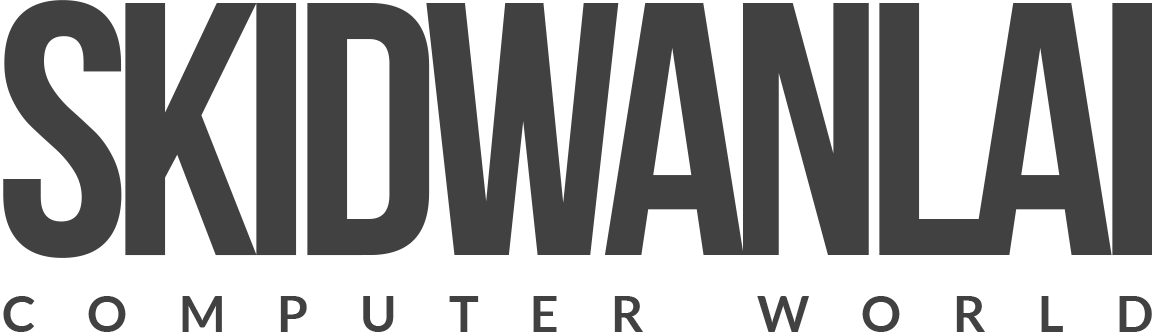
<style>
.page{position:relative;width:1155px;height:335px;background:#ffffff}
.page>*{position:absolute;margin:0}
.t1{font:360px "BebasNeueBold";letter-spacing:-0.05em;color:#414141}
.t2{font:50px "LatoBold";letter-spacing:1.038em;color:#414141}
</style>
<div class="page">
<p class="t1" style="left:3px;top:0px;width:1149px;height:258px">SKIDWANLAI</p>
<p class="t2" style="left:3px;top:296px;width:1149px;height:36px">COMPUTER WORLD</p>
</div>
